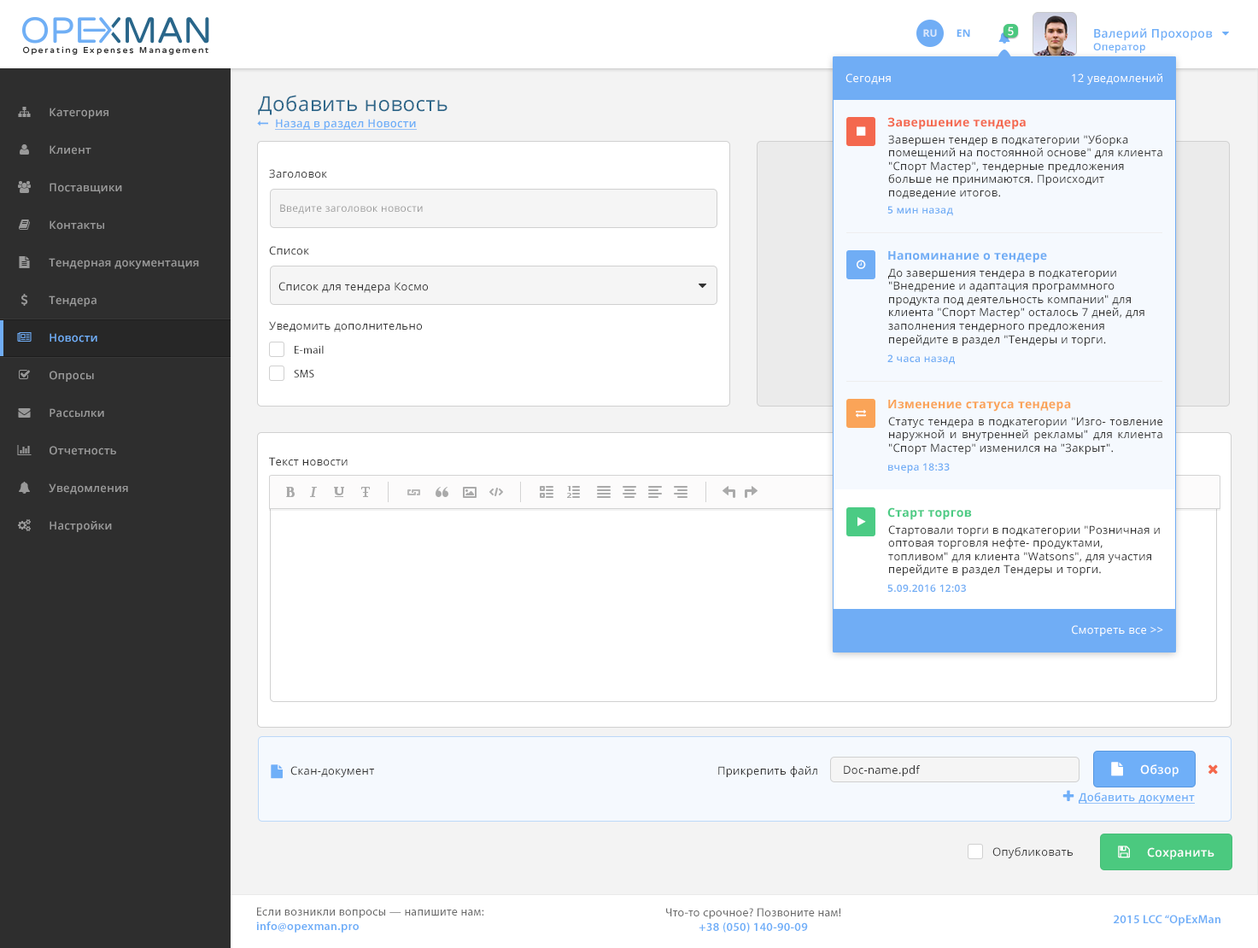
<style>
.page{position:relative;width:1258px;height:948px;background:#ffffff}
.page>*{position:absolute;margin:0}
.t1{font:10.2px "OpenSans-Bold";letter-spacing:0.025em;color:#dbe8fc;text-transform:uppercase}
.t2{font:10.2px "OpenSans-Bold";letter-spacing:0.025em;color:#6faff8;text-transform:uppercase}
.t3{font:11.1px "OpenSans-Semibold";letter-spacing:0.025em;color:#ffffff}
.t4{font:11.9px "OpenSans-Semibold";letter-spacing:0.025em;color:#6eaef7}
.t5{font:10.2px "OpenSans-Semibold";letter-spacing:0.025em;color:#6eaef7}
.t6{font:11.1px "OpenSans";letter-spacing:0.025em;color:#ffffff}
.t7{font:20.5px "OpenSans";letter-spacing:0.025em;color:#2c6689}
.t8{font:11.1px "OpenSans-Semibold";letter-spacing:0.025em;color:#999999}
.t9{font:11.1px "OpenSans-Semibold";letter-spacing:0.025em;color:#6faff8;text-decoration:underline}
.t10{font:12px "OpenSans-Bold";letter-spacing:0.025em;color:#f4684e}
.t11{font:11.1px "OpenSans";letter-spacing:0.025em;color:#333333}
.t12{font:10.2px "OpenSans";letter-spacing:0.025em;color:#999999}
.t13{font:10.2px "OpenSans-Semibold";letter-spacing:0.025em;color:#70adf5}
.t14{font:12px "OpenSans-Bold";letter-spacing:0.025em;color:#70adf5}
.t15{font:11.1px "OpenSans-Semibold";letter-spacing:0.025em;color:#70adf5}
.t16{font:11.1px "MyriadPro-Regular";letter-spacing:0.025em;color:#333333}
.t17{font:12px "OpenSans-Bold";letter-spacing:0.025em;color:#faa458}
.t18{font:12px "OpenSans-Bold";letter-spacing:0.025em;color:#4bcb84}
.t19{font:12px "OpenSans-Semibold";letter-spacing:0.025em;color:#ffffff}
.t20{font:11.1px "OpenSans";letter-spacing:0.025em;color:#3a3a3a}
.t21{font:11.9px "MyriadPro-Regular";letter-spacing:0.025em;color:#696969}
.t22{font:11.9px "MyriadPro-Semibold";letter-spacing:0.025em;color:#6eaef8}
</style>
<div class="page">
<p class="t1" style="left:923px;top:29px;width:14px;height:8px">Ru</p>
<p class="t2" style="left:956px;top:29px;width:14px;height:8px">EN</p>
<p class="t3" style="left:1008px;top:26px;width:6px;height:10px">5</p>
<p class="t4" style="left:1093px;top:28px;width:120px;height:25px">Валерий Прохоров<br><span class="t5">Оператор</span></p>
<p class="t6" style="left:845px;top:73px;width:46px;height:12px">Сегодня</p>
<p class="t6" style="left:1072px;top:73px;width:90px;height:12px">12 уведомлений</p>
<p class="t7" style="left:258px;top:95px;width:189px;height:20px">Добавить новость</p>
<p class="t8" style="left:50px;top:108px;width:58px;height:11px">Категория</p>
<p class="t9" style="left:275px;top:119px;width:142px;height:11px">Назад в раздел Новости</p>
<p class="t10" style="left:887px;top:117px;width:139px;height:13px">Завершение тендера</p>
<p class="t11" style="left:888px;top:135px;width:274px;height:64px">Завершен тендер в подкатегории "Уборка помещений на постоянной основе" для клиента "Спорт Мастер", тендерные предложения больше не принимаются. Происходит подведение итогов.</p>
<p class="t8" style="left:50px;top:145px;width:41px;height:10px">Клиент</p>
<p class="t11" style="left:269px;top:169px;width:58px;height:9px">Заголовок</p>
<p class="t8" style="left:50px;top:183px;width:72px;height:11px">Поставщики</p>
<p class="t12" style="left:280px;top:204px;width:143px;height:10px">Введите заголовок новости</p>
<p class="t13" style="left:887px;top:206px;width:66px;height:10px">5 мин назад</p>
<p class="t8" style="left:50px;top:220px;width:54px;height:10px">Контакты</p>
<p class="t11" style="left:269px;top:246px;width:40px;height:9px">Список</p>
<p class="t8" style="left:49px;top:258px;width:150px;height:11px">Тендерная документация</p>
<p class="t14" style="left:888px;top:251px;width:159px;height:12px">Напоминание о тендере</p>
<p class="t11" style="left:888px;top:268px;width:256px;height:78px">До завершения тендера в подкатегории "Внедрение и адаптация программного продукта под деятельность компании" для клиента "Спорт Мастер" осталось 7 дней, для заполнения тендерного предложения перейдите в раздел "Тендеры и торги.</p>
<p class="t11" style="left:278px;top:282px;width:150px;height:11px">Список для тендера Космо</p>
<p class="t8" style="left:49px;top:295px;width:48px;height:12px">Тендера</p>
<p class="t11" style="left:269px;top:321px;width:153px;height:11px">Уведомить дополнительно</p>
<p class="t15" style="left:50px;top:333px;width:47px;height:9px">Новости</p>
<p class="t16" style="left:295px;top:345px;width:29px;height:9px">E-mail</p>
<p class="t13" style="left:887px;top:354px;width:68px;height:11px">2 часа назад</p>
<p class="t8" style="left:50px;top:371px;width:44px;height:11px">Опросы</p>
<p class="t16" style="left:294px;top:370px;width:20px;height:7px">SMS</p>
<p class="t17" style="left:888px;top:400px;width:183px;height:12px">Изменение статуса тендера</p>
<p class="t8" style="left:50px;top:408px;width:54px;height:10px">Рассылки</p>
<p class="t11" style="left:888px;top:417px;width:274px;height:37px;text-align:justify">Статус тендера в подкатегории "Изго- товление наружной и внутренней рекламы" для клиента "Спорт Мастер" изменился на "Закрыт".</p>
<p class="t8" style="left:50px;top:446px;width:66px;height:9px">Отчетность</p>
<p class="t11" style="left:269px;top:457px;width:79px;height:9px">Текст новости</p>
<p class="t13" style="left:888px;top:463px;width:62px;height:10px">вчера 18:33</p>
<p class="t8" style="left:49px;top:483px;width:79px;height:11px">Уведомления</p>
<p class="t18" style="left:887px;top:507px;width:85px;height:13px">Старт торгов</p>
<p class="t8" style="left:50px;top:521px;width:62px;height:11px">Настройки</p>
<p class="t11" style="left:888px;top:525px;width:272px;height:51px">Стартовали торги в подкатегории "Розничная и оптовая торговля нефте- продуктами, топливом" для клиента "Watsons", для участия перейдите в раздел Тендеры и торги.</p>
<p class="t13" style="left:887px;top:584px;width:79px;height:8px">5.09.2016 12:03</p>
<p class="t6" style="left:1072px;top:625px;width:91px;height:11px">Смотреть все &gt;&gt;</p>
<p class="t11" style="left:290px;top:766px;width:84px;height:11px">Скан-документ</p>
<p class="t11" style="left:718px;top:766px;width:99px;height:11px">Прикрепить файл</p>
<p class="t11" style="left:844px;top:765px;width:77px;height:11px">Doc-name.pdf</p>
<p class="t19" style="left:1140px;top:764px;width:39px;height:13px">Обзор</p>
<p class="t9" style="left:1079px;top:793px;width:116px;height:11px">Добавить документ</p>
<p class="t20" style="left:992px;top:847px;width:81px;height:11px">Опубликовать</p>
<p class="t19" style="left:1147px;top:847px;width:67px;height:13px">Сохранить</p>
<p class="t21" style="left:256px;top:907px;width:228px;height:26px">Если возникли вопросы — напишите нам:<br><span class="t22">info@opexman.pro</span></p>
<p class="t21" style="left:666px;top:908px;width:175px;height:25px;text-align:center">Что-то срочное? Позвоните нам!<br><span class="t22">+38 (050) 140-90-09</span></p>
<p class="t22" style="left:1114px;top:915px;width:106px;height:11px">2015 LCC “OpExMan</p>
</div>
